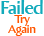
<style>
.page{position:relative;width:44px;height:36px;background:#ffffff}
.page>*{position:absolute;margin:0}
.t1{font:18.7px "AmiraParadiso";letter-spacing:-0.04em;color:#11aabb}
.t2{font:12px "AmiraParadiso";letter-spacing:-0.04em;color:#ff5500}
</style>
<div class="page">
<p class="t1" style="left:1px;top:0px;width:42px;height:14px">Failed</p>
<p class="t2" style="left:14px;top:15px;width:16px;height:11px">Try</p>
<p class="t2" style="left:8px;top:25px;width:28px;height:11px">Again</p>
</div>
